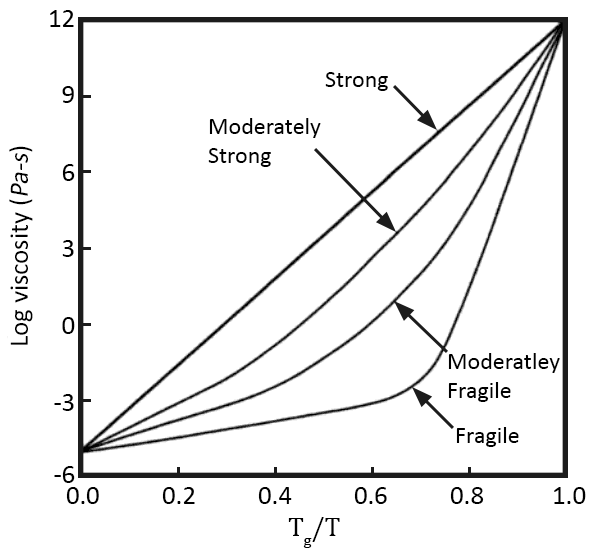
<style>
.page{position:relative;width:596px;height:550px;background:#ffffff}
.page>*{position:absolute;margin:0}
.t1{font:26.7px "Calibri";color:#000000}
.t2{font:24px "Calibri";color:#000000}
.t3{font:26.7px "Calibri";color:#000000;font-style:italic}
.t4{font:26.7px "CambriaMath";color:#000000}
</style>
<div class="page">
<p class="t1" style="left:50px;top:10px;width:24px;height:17px">12</p>
<p class="t2" style="left:325px;top:72px;width:63px;height:19px">Strong</p>
<p class="t1" style="left:62px;top:86px;width:12px;height:17px">9</p>
<p class="t2" style="left:208px;top:118px;width:113px;height:49px">Moderately<br>Strong</p>
<p class="t1" style="left:9px;top:146px;width:24px;height:199px;rotate:-90deg">Log viscosity (<span class="t3">Pa-s</span>)</p>
<p class="t1" style="left:62px;top:164px;width:13px;height:17px">6</p>
<p class="t1" style="left:62px;top:240px;width:12px;height:17px">3</p>
<p class="t1" style="left:62px;top:317px;width:13px;height:17px">0</p>
<p class="t2" style="left:448px;top:353px;width:112px;height:49px">Moderatley<br>Fragile</p>
<p class="t1" style="left:54px;top:394px;width:20px;height:17px">-3</p>
<p class="t2" style="left:456px;top:427px;width:63px;height:20px">Fragile</p>
<p class="t1" style="left:54px;top:466px;width:21px;height:17px">-6</p>
<p class="t1" style="left:66px;top:487px;width:520px;height:17px">0.0      0.2    0.4  0.6      0.8     1.0</p>
<p class="t4" style="left:288px;top:517px;width:52px;height:31px">Tg/T</p>
</div>
